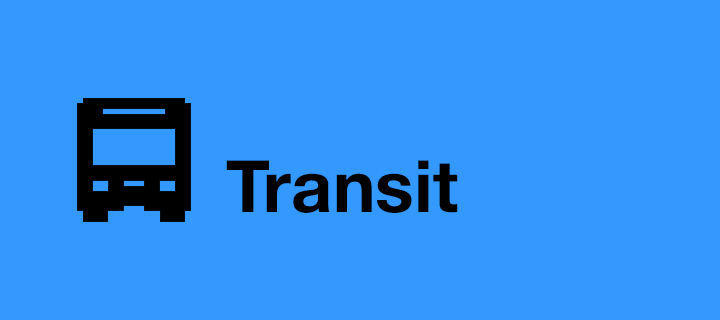
<style>
.page{position:relative;width:720px;height:320px;background:#3399ff}
.page>*{position:absolute;margin:0}
.t1{font:72px "HelveticaNeue-Bold";color:#000000}
</style>
<div class="page">
<p class="t1" style="left:226px;top:160px;width:232px;height:53px">Transit</p>
</div>
